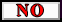
<style>
.page{position:relative;width:62px;height:22px;background:#fcfcfc}
.page>*{position:absolute;margin:0}
.t1{font:16.7px "TimesNewRomanPS-BoldMT";letter-spacing:0.1em;color:#ff0000}
</style>
<div class="page">
<p class="t1" style="left:16px;top:4px;width:27px;height:13px">NO</p>
</div>
